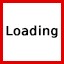
<style>
.page{position:relative;width:64px;height:64px;background:#ffffff}
.page>*{position:absolute;margin:0}
.t1{font:12.6px "DejaVuSans";color:#000000;font-weight:bold}
</style>
<div class="page">
<p class="t1" style="left:6px;top:25px;width:52px;height:13px;rotate:1deg">Loading</p>
</div>
